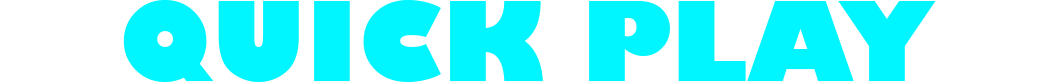
<style>
.page{position:relative;width:1054px;height:82px;background:#ffffff}
.page>*{position:absolute;margin:0}
.t1{font:108.3px "GillSans-UltraBold";color:#00f6ff}
</style>
<div class="page">
<p class="t1" style="left:123px;top:0px;width:813px;height:82px">QUICK PLAY</p>
</div>
